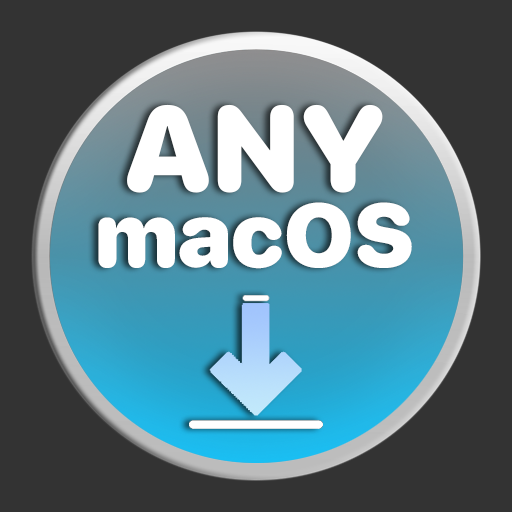
<style>
.page{position:relative;width:512px;height:512px;background:#333333}
.page>*{position:absolute;margin:0}
.t1{font:90px/76px "SFProRounded-Black";color:#ffffff}
.t2{font:120px/76px "SFProRounded-Black";color:#ffffff}
</style>
<div class="page">
<p class="t1" style="left:98px;top:104px;width:314px;height:165px;text-align:center"><span class="t2">ANY<br></span>macOS</p>
</div>
